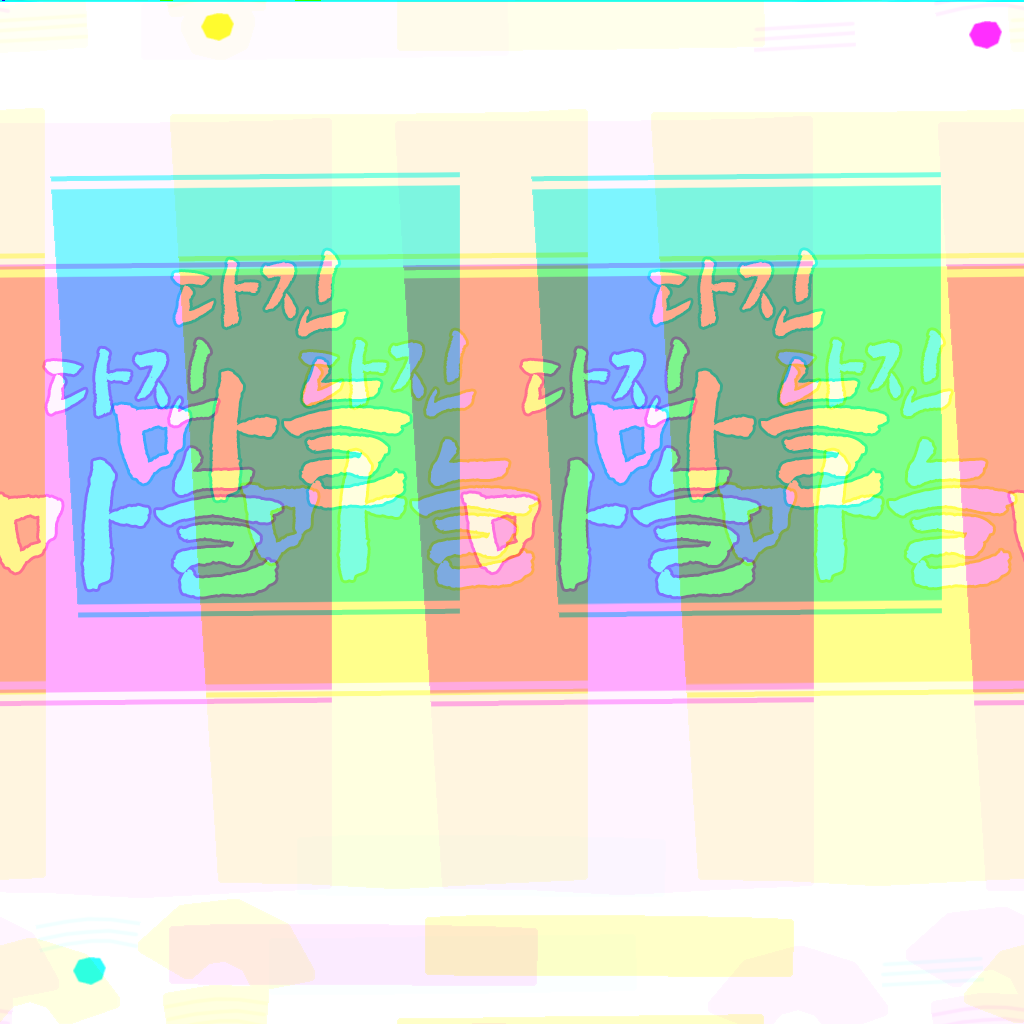
<style>
.page{position:relative;width:1024px;height:1024px}
.page>*{position:absolute;margin:0}
.t1{font:100px "SangSangRock";letter-spacing:0.025em}
.t2{font:99.9px "SangSangRock";letter-spacing:0.025em}
.t3{font:180px "SangSangRock";letter-spacing:0.025em}
.t4{font:179.8px "SangSangRock";letter-spacing:0.025em}
</style>
<div class="page">
<p class="t1" style="left:173px;top:248px;width:173px;height:87px">다진</p>
<p class="t2" style="left:650px;top:248px;width:173px;height:87px">다진</p>
<p class="t3" style="left:114px;top:357px;width:296px;height:149px;rotate:-1deg">마늘</p>
<p class="t4" style="left:591px;top:357px;width:296px;height:149px;rotate:-1deg">마늘</p>
</div>
